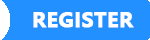
<style>
.page{position:relative;width:150px;height:40px;background:#2290ff}
.page>*{position:absolute;margin:0}
.t1{font:20px "MicrosoftYaHei-Bold";color:#ffffff;font-weight:bold}
</style>
<div class="page">
<p class="t1" style="left:33px;top:12px;width:101px;height:16px">REGISTER</p>
</div>
